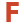
<style>
.page{position:relative;width:24px;height:24px;background:#ffffff}
.page>*{position:absolute;margin:0}
.t1{font:27.5px "Roboto-Black";letter-spacing:-0.01em;color:#cc4429;scale:0.96 1}
</style>
<div class="page">
<p class="t1" style="left:6px;top:2px;width:13px;height:20px">F</p>
</div>
